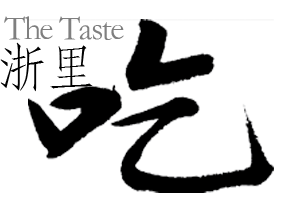
<style>
.page{position:relative;width:292px;height:213px;background:#ffffff}
.page>*{position:absolute;margin:0}
.t1{font:34.3px "STFangsong";letter-spacing:-0.05em;color:#7f7f7f}
.t2{font:52.8px "STFangsong";letter-spacing:-0.05em;color:#000000}
</style>
<div class="page">
<p class="t1" style="left:4px;top:16px;width:120px;height:24px">The Taste</p>
<p class="t2" style="left:0px;top:42px;width:93px;height:50px">浙里</p>
</div>
